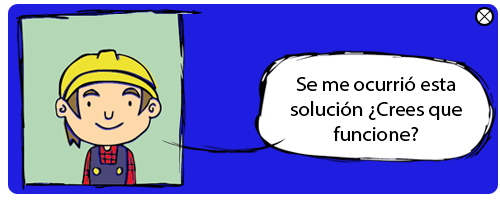
<style>
.page{position:relative;width:500px;height:200px;background:#1e1de0}
.page>*{position:absolute;margin:0}
.t1{font:20.8px "MyriadHebrew-Regular";color:#000000}
</style>
<div class="page">
<p class="t1" style="left:290px;top:76px;width:172px;height:65px;text-align:center">Se me ocurrió esta solución ¿Crees que funcione?</p>
</div>
